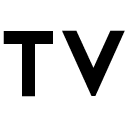
<style>
.page{position:relative;width:128px;height:128px;background:#ffffff}
.page>*{position:absolute;margin:0}
.t1{font:93px "Jaapokki-Regular";color:#000000}
</style>
<div class="page">
<p class="t1" style="left:3px;top:30px;width:122px;height:67px">TV</p>
</div>
